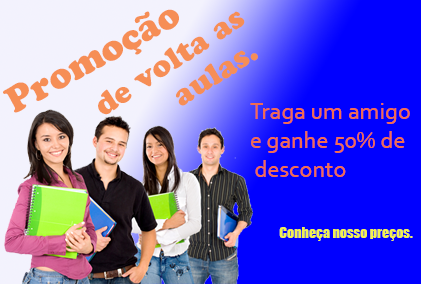
<style>
.page{position:relative;width:421px;height:284px;background:#0000ff}
.page>*{position:absolute;margin:0}
.t1{font:36px "CooperBlackStd";color:#f68e56}
.t2{font:30px "CooperBlackStd";color:#f68e56}
.t3{font:24px "Corbel";color:#f26c4f}
.t4{font:14px "Impact";color:#f2f14f}
</style>
<div class="page">
<p class="t1" style="left:3px;top:9px;width:176px;height:104px;rotate:-29deg">Promoção</p>
<p class="t2" style="left:98px;top:11px;width:147px;height:104px;rotate:-33deg">de volta as</p>
<p class="t2" style="left:176px;top:50px;width:82px;height:56px;rotate:-32deg">aulas.</p>
<p class="t3" style="left:250px;top:103px;width:160px;height:74px">Traga um amigo<br>e ganhe 50% de<br> desconto</p>
<p class="t4" style="left:279px;top:227px;width:134px;height:14px">Conheça nosso preços.</p>
</div>
